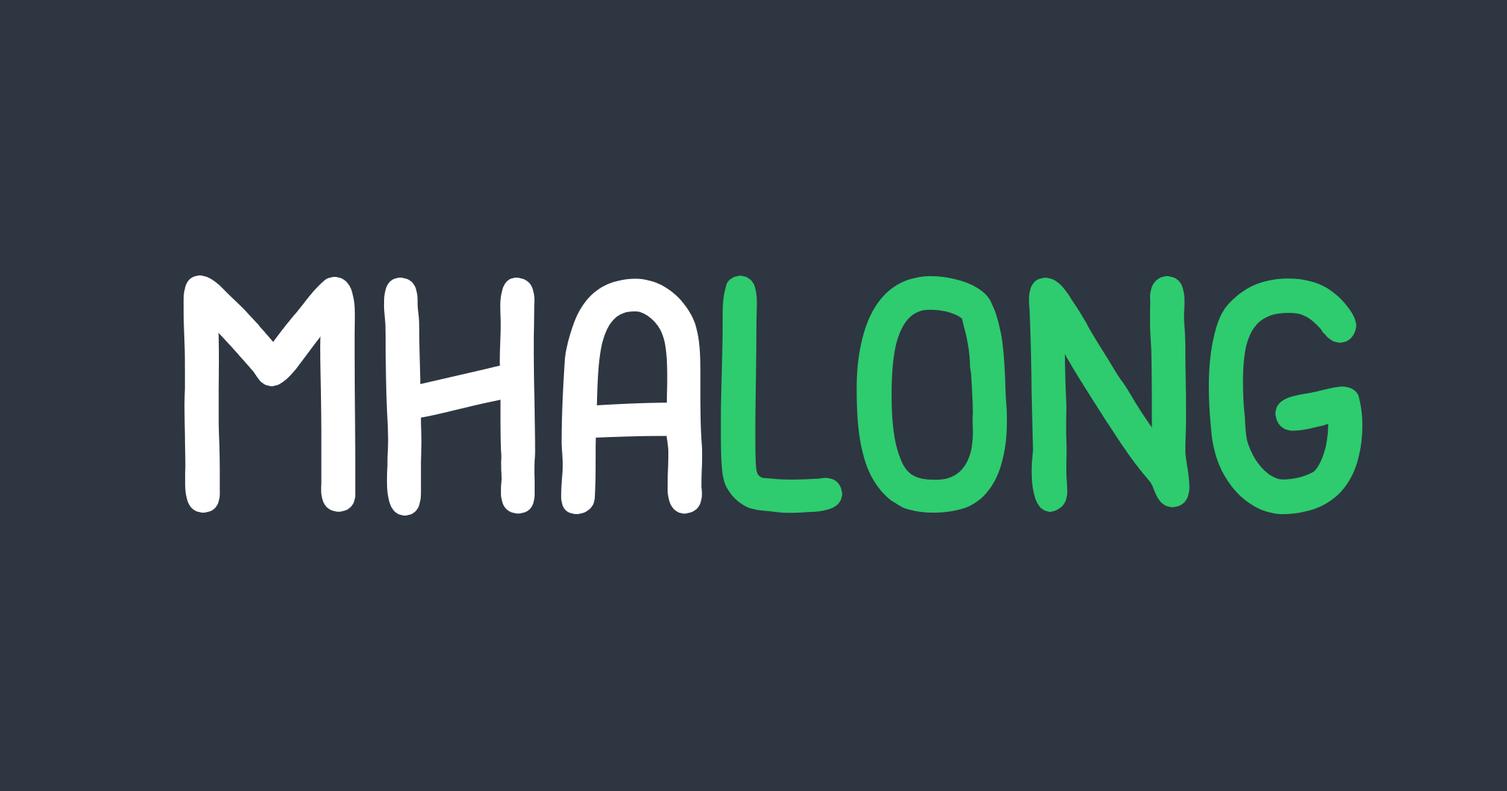
<style>
.page{position:relative;width:1507px;height:791px;background:#2e3641}
.page>*{position:absolute;margin:0}
.t1{font:459.1px "WaffleRegular";color:#ffffff}
.t2{font:459.1px "WaffleRegular";color:#2ecc6e}
</style>
<div class="page">
<p class="t1" style="left:191px;top:283px;width:505px;height:225px">MHA</p>
<p class="t2" style="left:728px;top:283px;width:627px;height:225px">LONG</p>
</div>
